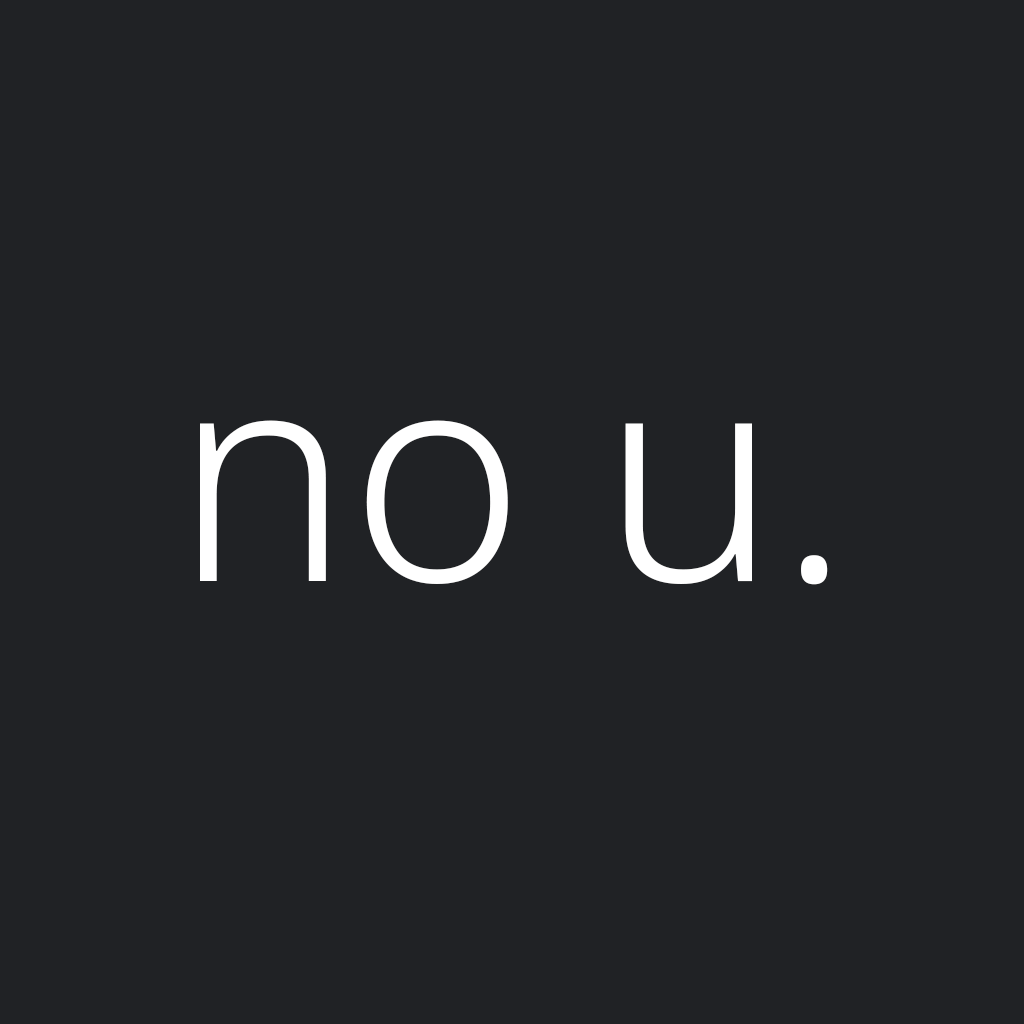
<style>
.page{position:relative;width:1024px;height:1024px;background:#202225}
.page>*{position:absolute;margin:0}
.t1{font:295.8px "NotoSans-Light";color:#ffffff}
</style>
<div class="page">
<p class="t1" style="left:200px;top:420px;width:628px;height:165px">no u.</p>
</div>
